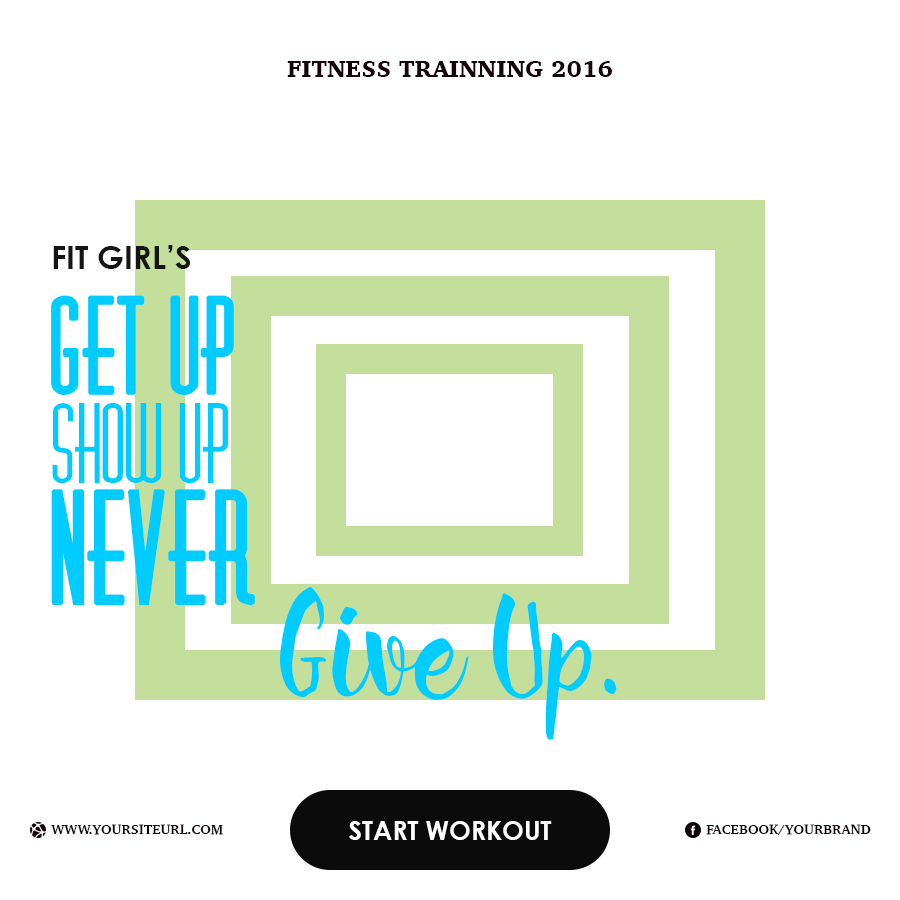
<style>
.page{position:relative;width:900px;height:900px;background:#ffffff}
.page>*{position:absolute;margin:0}
.t1{font:24px "Charter-Black";color:#14040a;text-transform:uppercase}
.t2{font:32px "CenturyGothic-Bold";color:#151514;text-transform:uppercase}
.t3{font:100px/90px "Diner-Fatt";color:#00ccff}
.t4{font:120px/80px "Diner-Fatt";color:#00ccff;text-transform:uppercase;font-weight:bold}
.t5{font:140px/120px "Diner-Fatt";color:#00ccff;text-transform:uppercase;font-weight:bold}
.t6{font:140px "HellenaScript";color:#00ccff}
.t7{font:26px "CenturyGothic-Bold";color:#ffffff;text-transform:uppercase}
.t8{font:14px "Charter-Bold";color:#14040a;text-transform:uppercase}
</style>
<div class="page">
<p class="t1" style="left:287px;top:61px;width:325px;height:16px">fitness trainning 2016</p>
<p class="t2" style="left:53px;top:245px;width:138px;height:24px">fit girl’s</p>
<p class="t3" style="left:51px;top:295px;width:204px;height:311px"><span class="t4">get up<br></span>show up<br><span class="t5">never</span></p>
<p class="t6" style="left:279px;top:587px;width:338px;height:153px">Give Up.</p>
<p class="t7" style="left:349px;top:821px;width:203px;height:19px">start workout</p>
<p class="t8" style="left:51px;top:824px;width:172px;height:11px">www.yoursiteurl.com</p>
<p class="t8" style="left:706px;top:824px;width:165px;height:11px">facebook/yourbrand</p>
</div>
